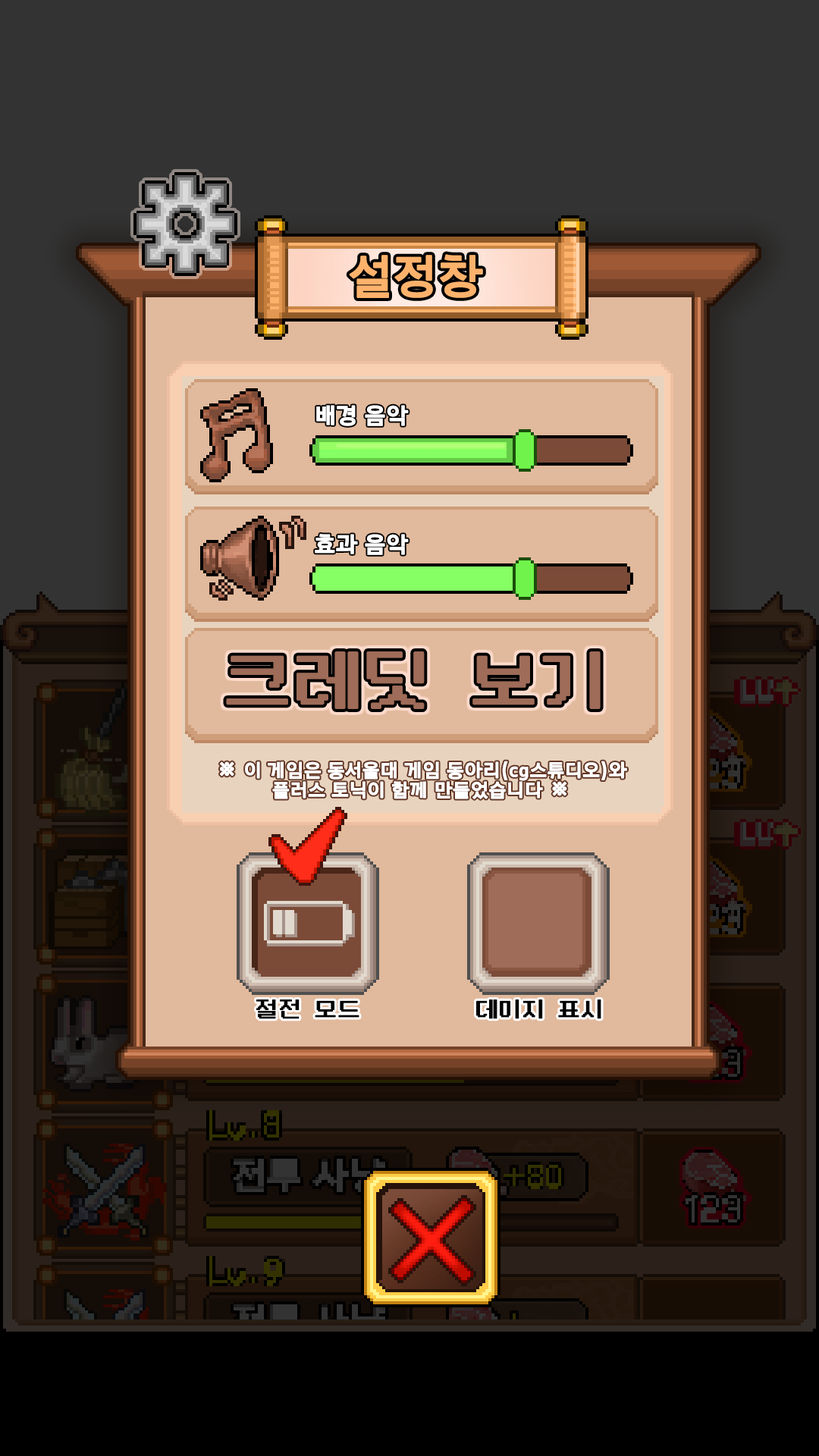
<style>
.page{position:relative;width:819px;height:1456px}
.page>*{position:absolute;margin:0}
.t1{font:47.8px "Arita-dotum-SemiBold_OTF";color:#fdb26c;font-weight:bold}
.t2{font:22.7px "Arita-dotum-Bold_OTF";color:#ffffff;font-weight:bold}
.t3{font:19px/9.9px "Arita-dotum-Bold_OTF";color:#ffffff;font-weight:bold}
.t4{font:22.7px/9.9px "Arita-dotum-Bold_OTF";color:#ffffff;font-weight:bold}
.t5{font:22.7px "NeoDunggeunmo-Regular";color:#000000;font-weight:bold}
</style>
<div class="page">
<p class="t1" style="left:349px;top:254px;width:134px;height:44px">설정창</p>
<p class="t2" style="left:316px;top:405px;width:93px;height:21px">배경 음악</p>
<p class="t2" style="left:315px;top:533px;width:94px;height:22px">효과 음악</p>
<p class="t3" style="left:219px;top:761px;width:408px;height:38px;text-align:center"><span class="t4">※</span> 이 게임은 동서울대 게임 동아리(cg스튜디오)와  <br><br>플러스 토닉이 함께 만들었습니다 <span class="t4">※</span></p>
<p class="t5" style="left:256px;top:999px;width:103px;height:20px">절전 모드</p>
<p class="t5" style="left:476px;top:999px;width:125px;height:20px">데미지 표시</p>
</div>
